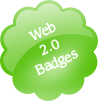
<style>
.page{position:relative;width:102px;height:104px;background:#ffffff}
.page>*{position:absolute;margin:0}
.t1{font:14px "Sling-Light";color:#ffffff;font-weight:bold}
</style>
<div class="page">
<p class="t1" style="left:28px;top:22px;width:50px;height:54px;text-align:center;rotate:-24deg">Web<br>2.0<br>Badges</p>
</div>
